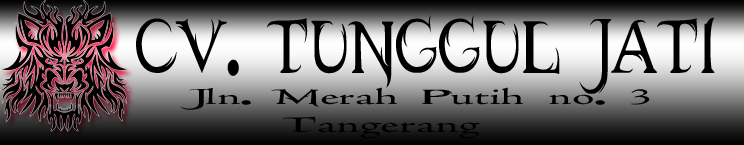
<style>
.page{position:relative;width:744px;height:145px}
.page>*{position:absolute;margin:0}
.t1{font:83.1px "AJensonPro-Regular";color:#000000;scale:0.69 1}
.t2{font:23px "AJensonPro-Regular";color:#000000;scale:2.05 1}
</style>
<div class="page">
<p class="t1" style="left:136px;top:15px;width:579px;height:79px">CV. TUNGGUL JATI</p>
<p class="t2" style="left:180px;top:87px;width:470px;height:52px">Jln. Merah Putih no. 3 <br>    Tangerang</p>
</div>
